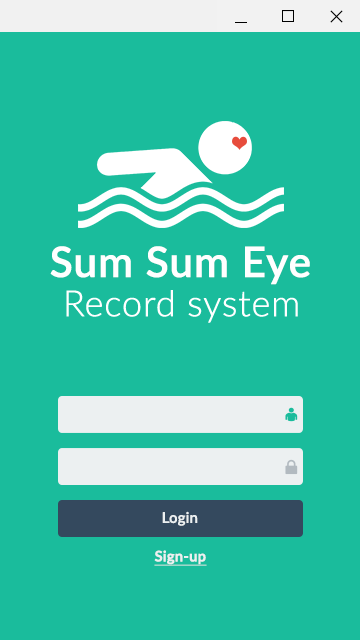
<style>
.page{position:relative;width:360px;height:640px;background:#1abc9c}
.page>*{position:absolute;margin:0}
.t1{font:42px "Lato-Semibold";color:#ffffff;font-weight:bold}
.t2{font:36px "Lato-Light";color:#ffffff;font-weight:bold}
.t3{font:14.5px "Lato-Semibold";color:#ecf0f1;font-weight:bold;text-decoration:underline}
</style>
<div class="page">
<p class="t1" style="left:50px;top:246px;width:260px;height:39px">Sum Sum Eye</p>
<p class="t2" style="left:66px;top:290px;width:232px;height:33px">Record system</p>
<p class="t3" style="left:154px;top:550px;width:53px;height:16px">Sign-up</p>
</div>
